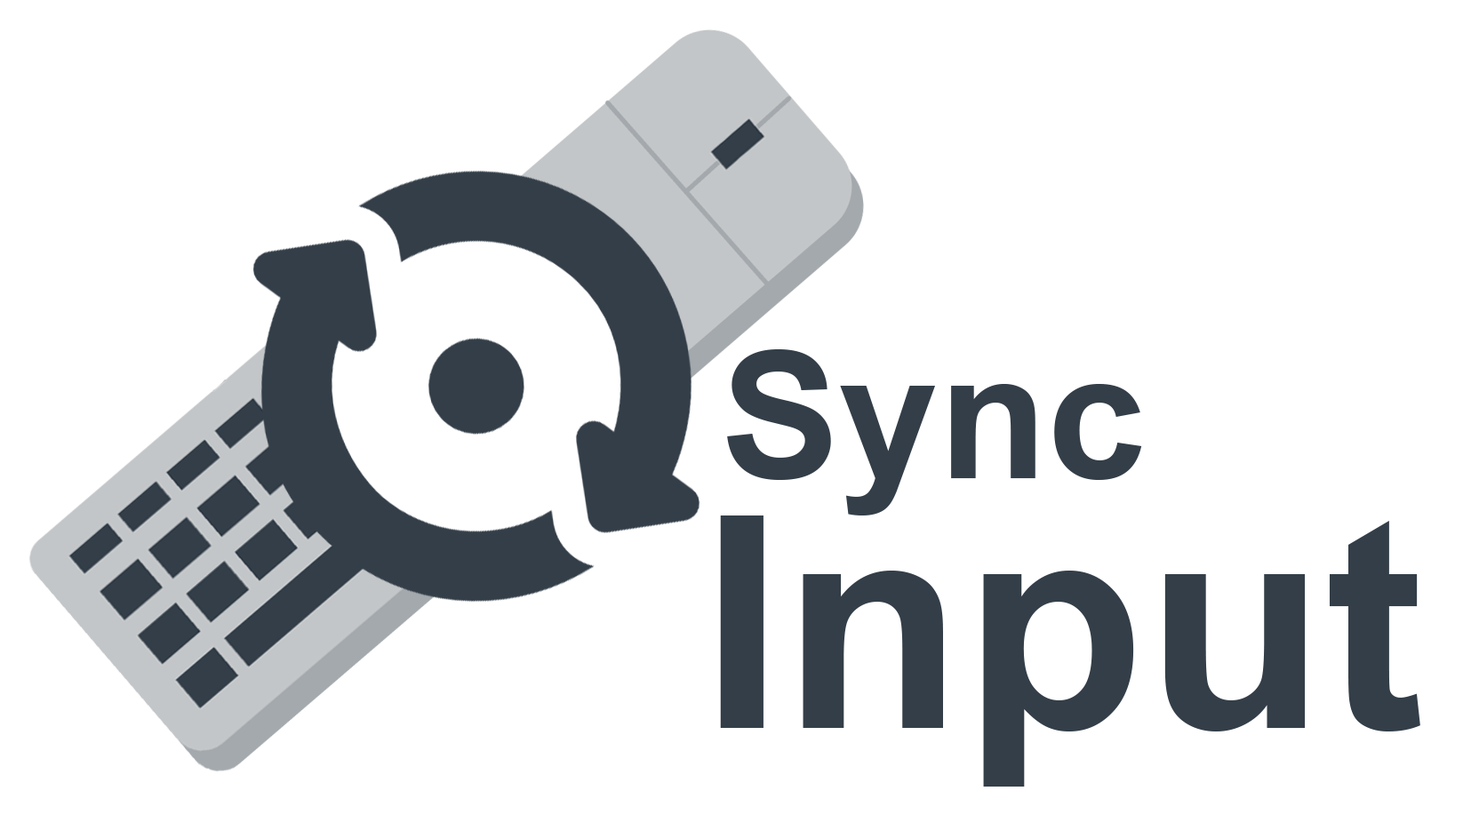
<style>
.page{position:relative;width:1463px;height:815px;background:#ffffff}
.page>*{position:absolute;margin:0}
.t1{font:177.8px "Arial-BoldMT";color:#333e48}
.t2{font:296.3px "Arial-BoldMT";color:#333e48}
</style>
<div class="page">
<p class="t1" style="left:727px;top:349px;width:415px;height:167px">Sync</p>
<p class="t2" style="left:720px;top:516px;width:700px;height:271px">Input</p>
</div>
